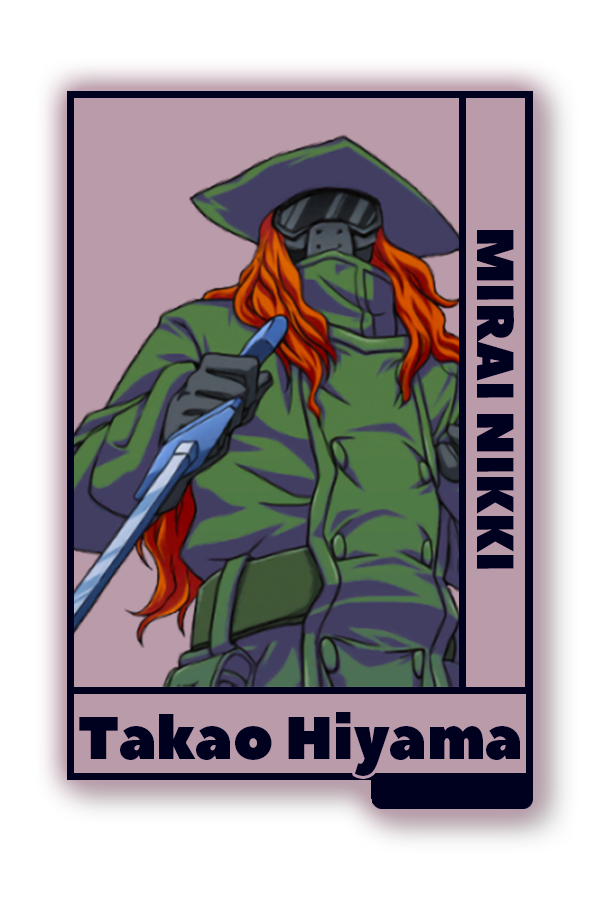
<style>
.page{position:relative;width:600px;height:900px;background:#ffffff}
.page>*{position:absolute;margin:0}
.t1{font:52px "PeaceSans";color:#00001b}
.t2{font:60.3px "PeaceSans";color:#00001b}
</style>
<div class="page">
<p class="t1" style="left:477px;top:230px;width:37px;height:339px;rotate:90deg">MIRAI NIKKI</p>
<p class="t2" style="left:79px;top:712px;width:441px;height:64px">Takao Hiyama</p>
</div>
